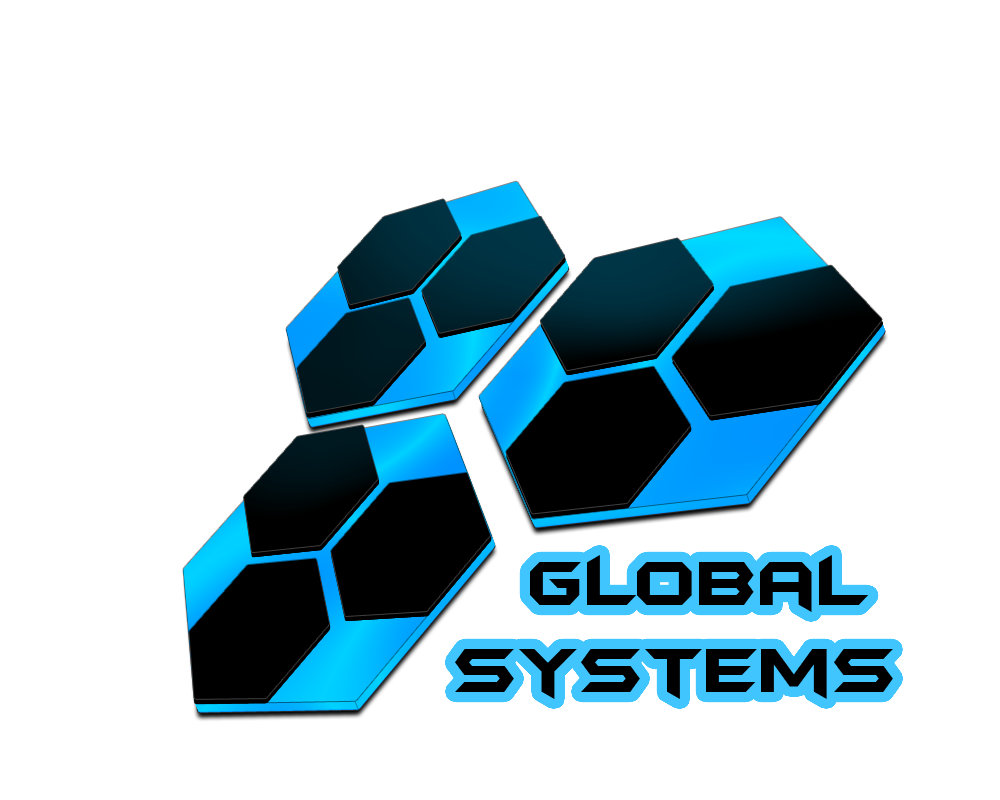
<style>
.page{position:relative;width:1000px;height:800px;background:#ffffff}
.page>*{position:absolute;margin:0}
.t1{font:72px "BatmanForeverAlternate";color:#000000}
</style>
<div class="page">
<p class="t1" style="left:455px;top:555px;width:438px;height:144px">Global <br>Systems</p>
</div>
